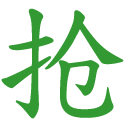
<style>
.page{position:relative;width:128px;height:128px;background:#ffffff}
.page>*{position:absolute;margin:0}
.t1{font:134.7px "DFKaiShu-SB-Estd-BF";color:#339933}
</style>
<div class="page">
<p class="t1" style="left:1px;top:8px;width:123px;height:111px">抢</p>
</div>
